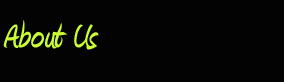
<style>
.page{position:relative;width:284px;height:82px;background:#030303}
.page>*{position:absolute;margin:0}
.t1{font:44.8px "Amienne-Bold";color:#ccff33}
</style>
<div class="page">
<p class="t1" style="left:3px;top:20px;width:96px;height:30px">About Us</p>
</div>
